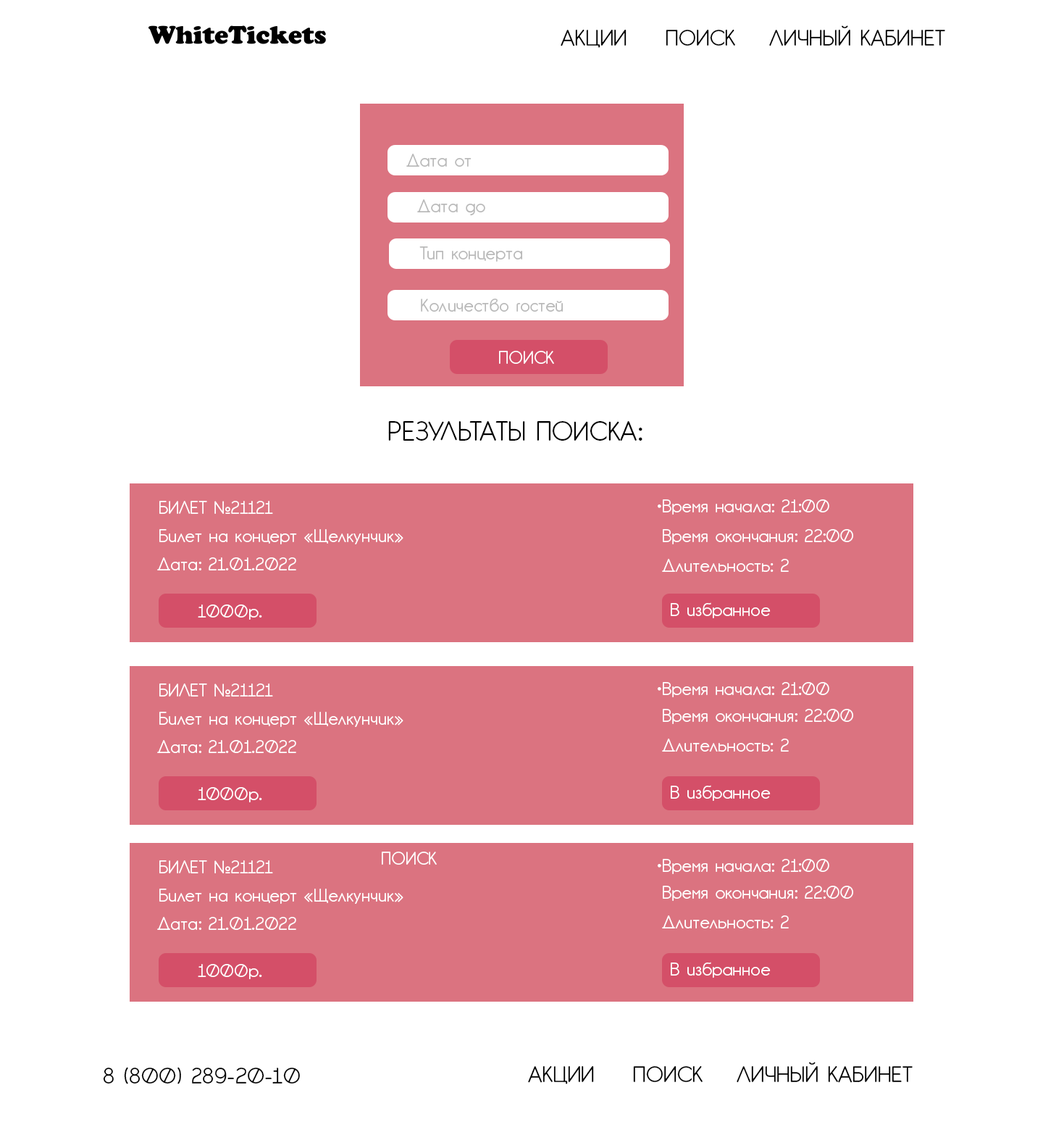
<style>
.page{position:relative;width:1043px;height:1143px;background:#ffffff}
.page>*{position:absolute;margin:0}
.t1{font:21.7px "GardensC";color:#000000}
.t2{font:17.4px "GardensC";color:#b9b9b9}
.t3{font:17.4px "GardensC";color:#ffffff}
.t4{font:26.1px "GardensC";color:#000000}
</style>
<div class="page">
<p class="t1" style="left:561px;top:25px;width:385px;height:23px">АКЦИИ  ПОИСК  ЛИЧНЫЙ КАБИНЕТ</p>
<p class="t2" style="left:407px;top:154px;width:65px;height:13px">Дата от</p>
<p class="t2" style="left:417px;top:199px;width:69px;height:17px">Дата до</p>
<p class="t2" style="left:420px;top:246px;width:102px;height:16px">Тип концерта</p>
<p class="t2" style="left:421px;top:299px;width:142px;height:13px">Количество гостей</p>
<p class="t3" style="left:499px;top:351px;width:55px;height:13px">ПОИСК</p>
<p class="t4" style="left:388px;top:421px;width:255px;height:20px">РЕЗУЛЬТАТЫ ПОИСКА:</p>
<p class="t3" style="left:159px;top:501px;width:114px;height:13px">БИЛЕТ №21121</p>
<p class="t3" style="left:658px;top:499px;width:172px;height:15px">•Время начала: 21:00</p>
<p class="t3" style="left:159px;top:529px;width:245px;height:15px">Билет на концерт «Щелкунчик»</p>
<p class="t3" style="left:663px;top:529px;width:191px;height:15px">Время окончания: 22:00</p>
<p class="t3" style="left:157px;top:557px;width:139px;height:13px">Дата: 21.01.2022</p>
<p class="t3" style="left:662px;top:559px;width:127px;height:13px">Длительность: 2</p>
<p class="t3" style="left:198px;top:604px;width:64px;height:16px">1000р.</p>
<p class="t3" style="left:671px;top:602px;width:100px;height:16px">В избранное</p>
<p class="t3" style="left:159px;top:683px;width:114px;height:13px">БИЛЕТ №21121</p>
<p class="t3" style="left:658px;top:682px;width:172px;height:15px">•Время начала: 21:00</p>
<p class="t3" style="left:159px;top:712px;width:245px;height:15px">Билет на концерт «Щелкунчик»</p>
<p class="t3" style="left:663px;top:709px;width:191px;height:15px">Время окончания: 22:00</p>
<p class="t3" style="left:157px;top:740px;width:139px;height:13px">Дата: 21.01.2022</p>
<p class="t3" style="left:662px;top:738px;width:127px;height:13px">Длительность: 2</p>
<p class="t3" style="left:671px;top:785px;width:100px;height:16px">В избранное</p>
<p class="t3" style="left:198px;top:787px;width:64px;height:15px">1000р.</p>
<p class="t3" style="left:382px;top:851px;width:55px;height:13px">ПОИСК</p>
<p class="t3" style="left:159px;top:860px;width:114px;height:13px">БИЛЕТ №21121</p>
<p class="t3" style="left:658px;top:859px;width:172px;height:15px">•Время начала: 21:00</p>
<p class="t3" style="left:159px;top:888px;width:245px;height:16px">Билет на концерт «Щелкунчик»</p>
<p class="t3" style="left:663px;top:886px;width:191px;height:15px">Время окончания: 22:00</p>
<p class="t3" style="left:157px;top:917px;width:139px;height:13px">Дата: 21.01.2022</p>
<p class="t3" style="left:662px;top:915px;width:127px;height:13px">Длительность: 2</p>
<p class="t3" style="left:198px;top:964px;width:64px;height:15px">1000р.</p>
<p class="t3" style="left:671px;top:962px;width:100px;height:16px">В избранное</p>
<p class="t1" style="left:528px;top:1062px;width:385px;height:22px">АКЦИИ  ПОИСК  ЛИЧНЫЙ КАБИНЕТ</p>
<p class="t1" style="left:103px;top:1067px;width:197px;height:17px">8 (800) 289-20-10</p>
</div>
